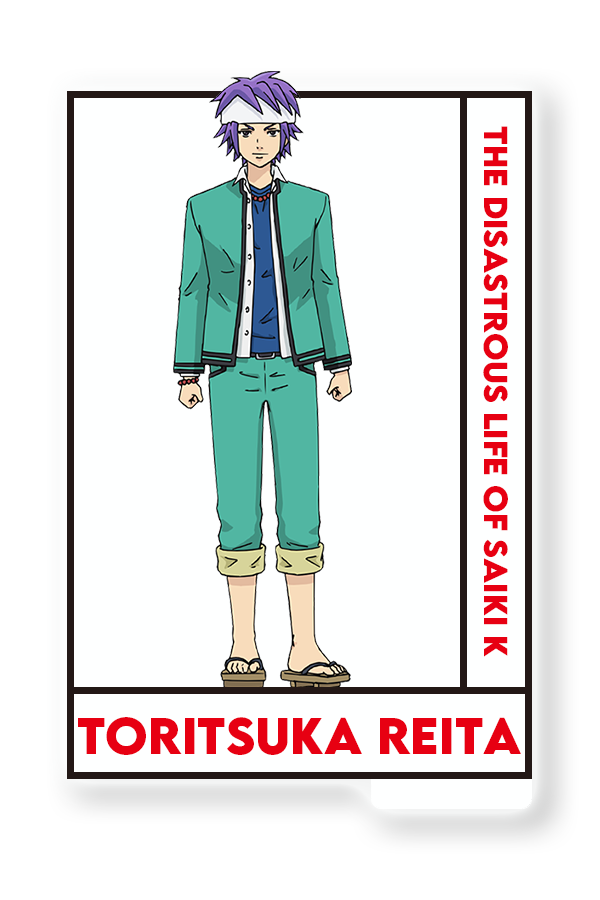
<style>
.page{position:relative;width:600px;height:900px;background:#feffff}
.page>*{position:absolute;margin:0}
.t1{font:29.6px "LEMONMILK-Bold";color:#e70012}
.t2{font:45.6px "LEMONMILK-Bold";color:#e70012}
</style>
<div class="page">
<p class="t1" style="left:483px;top:126px;width:25px;height:531px;rotate:90deg">THE disastrous Life of saiki K</p>
<p class="t2" style="left:78px;top:717px;width:443px;height:38px">Toritsuka Reita</p>
</div>
